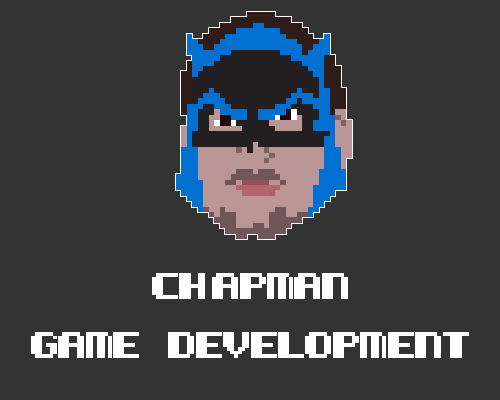
<style>
.page{position:relative;width:500px;height:400px;background:#333333}
.page>*{position:absolute;margin:0}
.t1{font:37.8px/59.5px "KemcoPixelBold";color:#ffffff}
</style>
<div class="page">
<p class="t1" style="left:31px;top:273px;width:438px;height:85px;text-align:center">chapman<br>game development</p>
</div>
